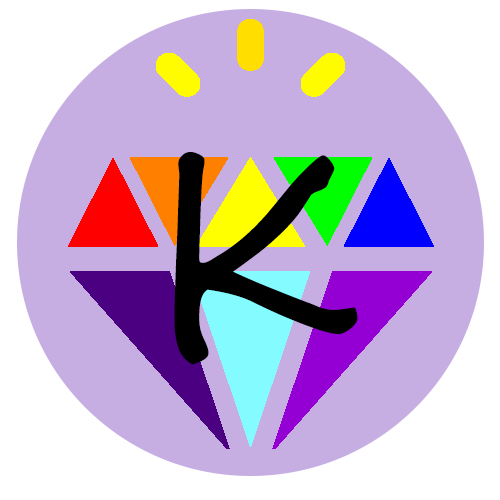
<style>
.page{position:relative;width:500px;height:500px;background:#c6aee3}
.page>*{position:absolute;margin:0}
.t1{font:280px "SegoeScript";color:#000000}
</style>
<div class="page">
<p class="t1" style="left:174px;top:152px;width:184px;height:213px">K</p>
</div>
